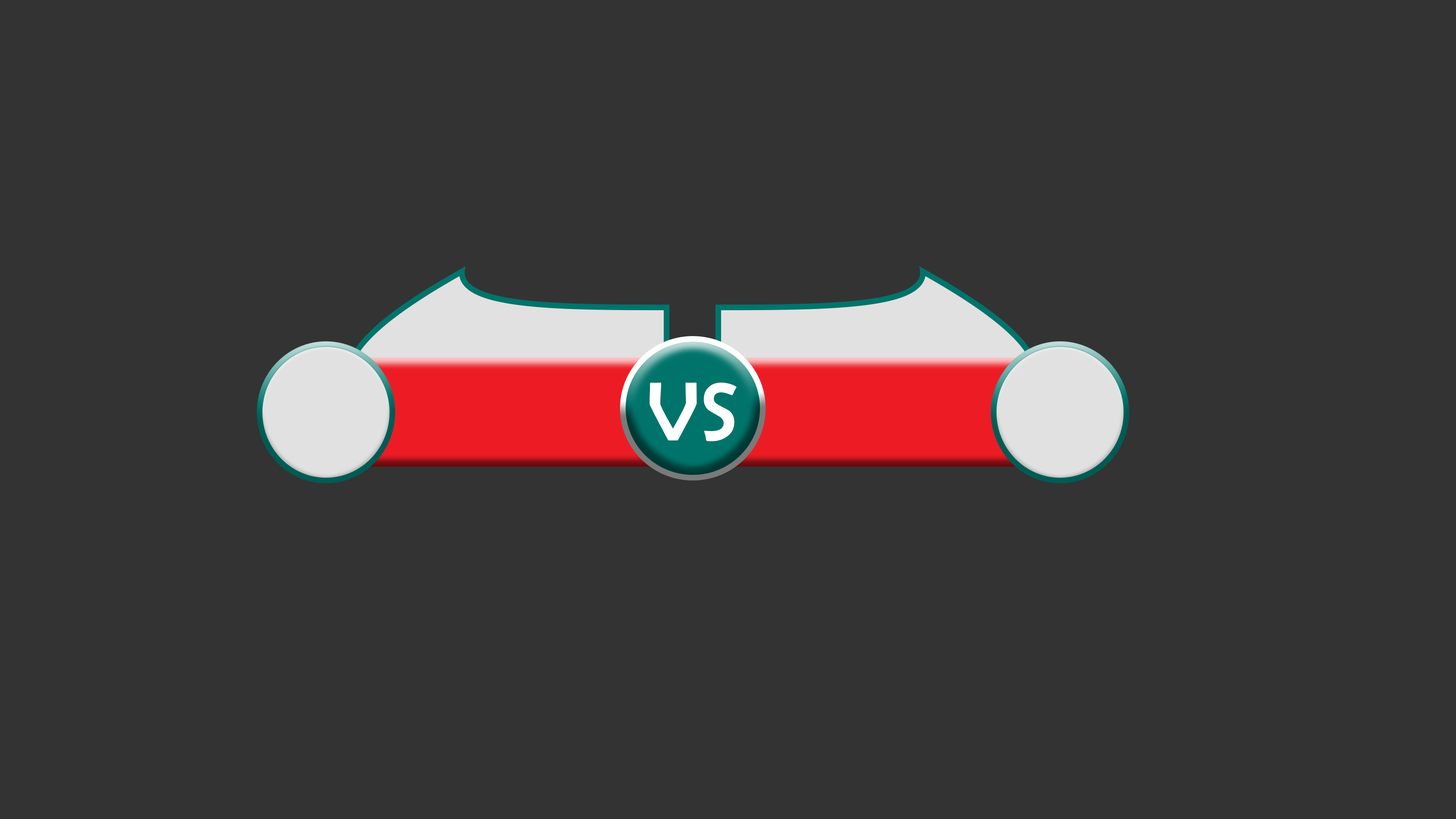
<style>
.page{position:relative;width:1456px;height:819px;background:#333333}
.page>*{position:absolute;margin:0}
.t1{font:84.3px "BerlinSansFB-Reg";color:#ffffff}
</style>
<div class="page">
<p class="t1" style="left:650px;top:383px;width:86px;height:58px">VS</p>
</div>
